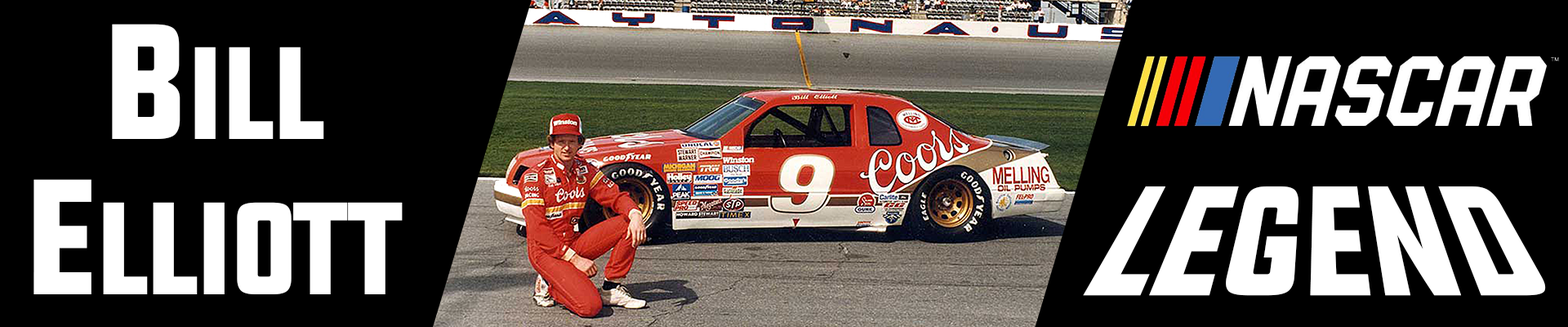
<style>
.page{position:relative;width:1568px;height:327px;background:#000000}
.page>*{position:absolute;margin:0}
.t1{font:130.7px "UPBOLTERS";color:#ffffff}
.t2{font:163.3px "UPBOLTERS";color:#ffffff}
.t3{font:155.2px "UPBOLTERS";color:#ffffff}
</style>
<div class="page">
<p class="t1" style="left:33px;top:24px;width:370px;height:270px"><span class="t2">B</span>ILL <span class="t2">E</span>LLIOTT</p>
<p class="t3" style="left:1083px;top:186px;width:463px;height:110px">LEGEND</p>
</div>
